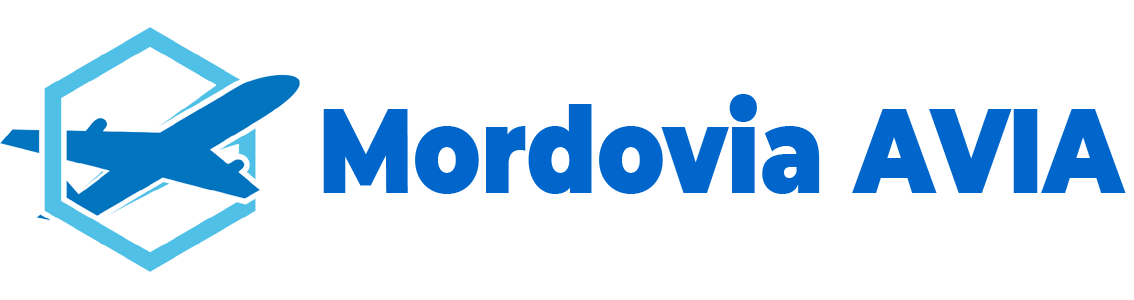
<style>
.page{position:relative;width:1134px;height:300px;background:#ffffff}
.page>*{position:absolute;margin:0}
.t1{font:120px "Montserrat-Black";color:#0066cc;scale:0.83 1}
</style>
<div class="page">
<p class="t1" style="left:323px;top:94px;width:803px;height:100px">Mordovia AVIA</p>
</div>
